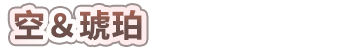
<style>
.page{position:relative;width:360px;height:50px;background:#ffffff}
.page>*{position:absolute;margin:0}
.t1{font:32px "SourceHanSansSC-Bold";font-weight:bold}
</style>
<div class="page">
<p class="t1" style="left:14px;top:9px;width:128px;height:32px">空＆琥珀</p>
</div>
